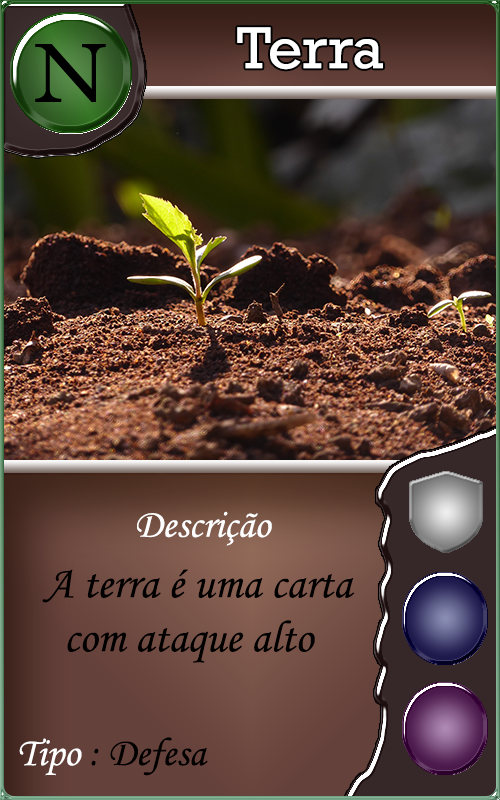
<style>
.page{position:relative;width:500px;height:800px}
.page>*{position:absolute;margin:0}
.t1{font:60px "Rockwell";color:#ffffff}
.t2{font:40px "MonotypeCorsiva";color:#fffefe}
.t3{font:45px "MonotypeCorsiva";color:#000000}
</style>
<div class="page">
<p class="t1" style="left:237px;top:27px;width:146px;height:43px">Terra</p>
<p class="t2" style="left:137px;top:511px;width:135px;height:35px">Descrição</p>
<p class="t3" style="left:42px;top:569px;width:313px;height:94px;text-align:center">A terra é uma carta<br>com ataque alto</p>
</div>
